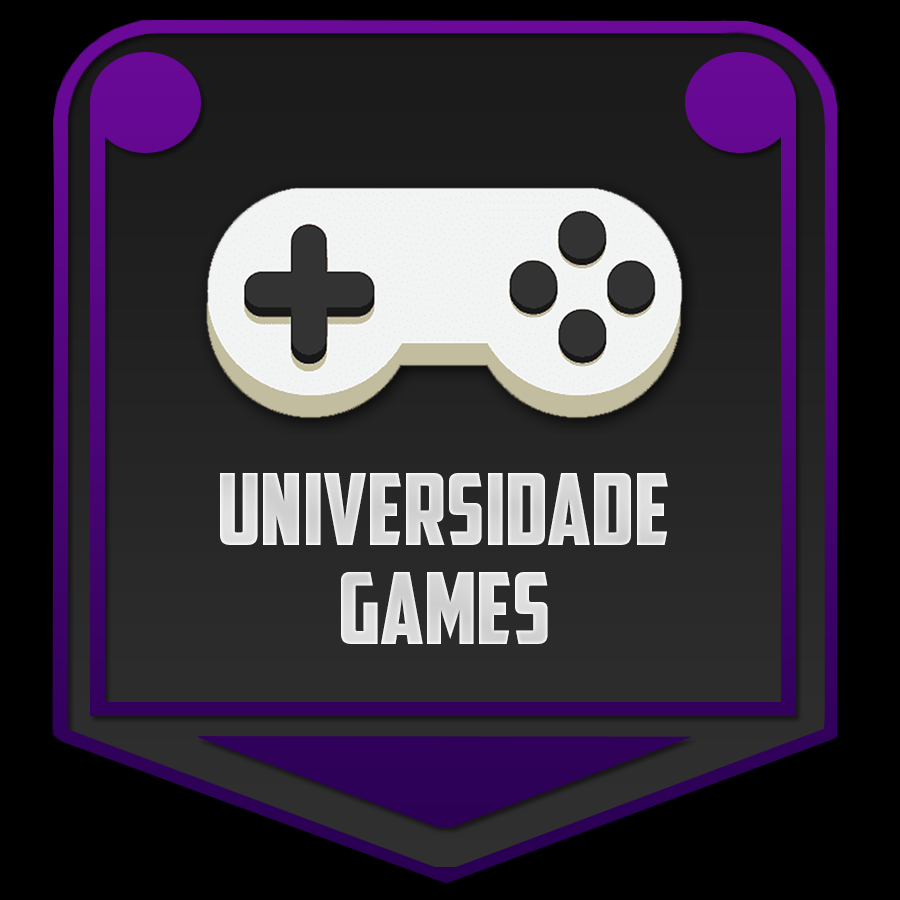
<style>
.page{position:relative;width:900px;height:900px;background:#000000}
.page>*{position:absolute;margin:0}
.t1{font:100px "AmericanCaptain";color:#dbdbdb}
.t2{font:100px "AmericanCaptain";color:#dddddd}
</style>
<div class="page">
<p class="t1" style="left:220px;top:473px;width:448px;height:72px">Universidade</p>
<p class="t2" style="left:341px;top:572px;width:207px;height:72px">Games</p>
</div>
